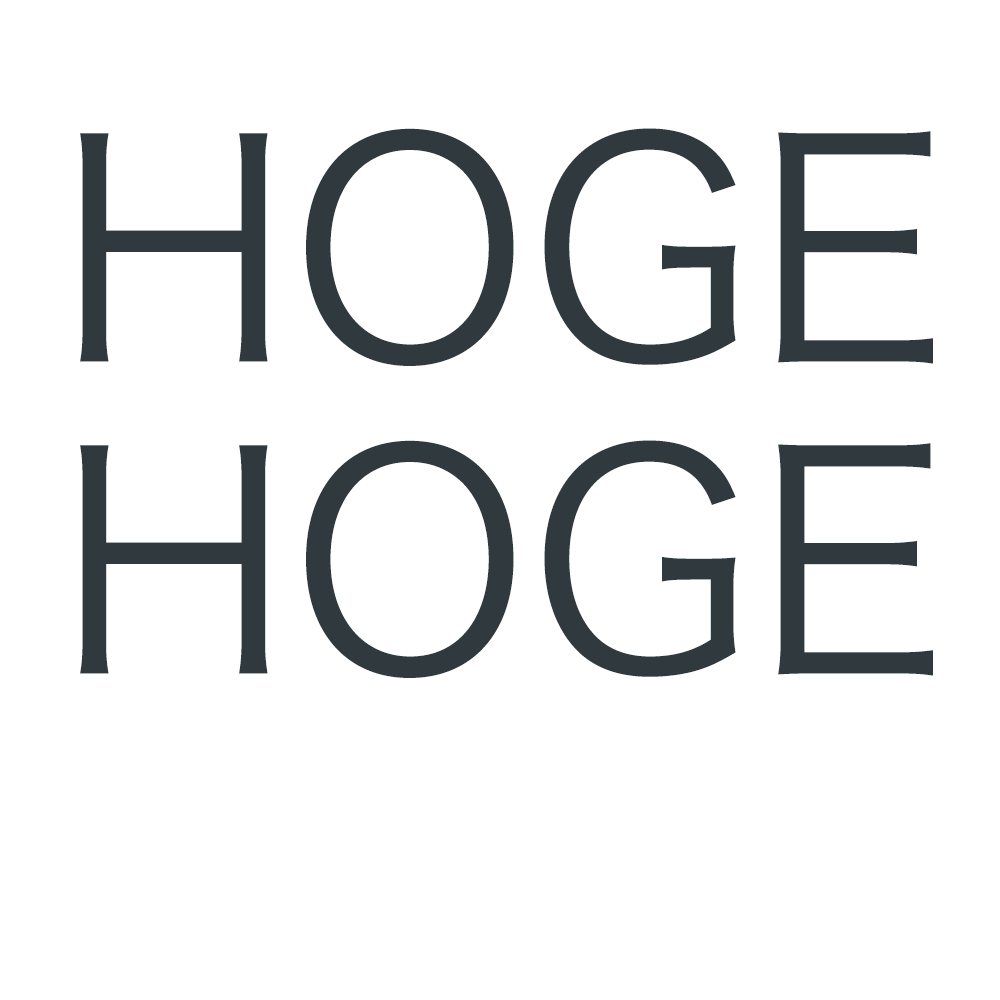
<style>
.page{position:relative;width:1000px;height:1000px;background:#ffffff}
.page>*{position:absolute;margin:0}
.t1{font:300px "HiraKakuPro-W3";color:#2f393e}
</style>
<div class="page">
<p class="t1" style="left:80px;top:128px;width:853px;height:238px">HOGE</p>
<p class="t1" style="left:80px;top:440px;width:853px;height:238px">HOGE</p>
</div>
